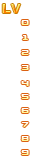
<style>
.page{position:relative;width:30px;height:160px;background:#ffffff}
.page>*{position:absolute;margin:0}
.t1{font:10px "Counter-StrikeRegular"}
.t2{font:10px "Counter-StrikeRegular";color:#ffffff}
</style>
<div class="page">
<p class="t1" style="left:21px;top:20px;width:8px;height:5px">0</p>
<p class="t1" style="left:22px;top:35px;width:6px;height:5px">1</p>
<p class="t1" style="left:21px;top:50px;width:8px;height:5px">2</p>
<p class="t1" style="left:21px;top:65px;width:8px;height:5px">3</p>
<p class="t1" style="left:21px;top:81px;width:8px;height:5px">4</p>
<p class="t1" style="left:21px;top:94px;width:8px;height:5px">5</p>
<p class="t1" style="left:21px;top:108px;width:8px;height:5px">6</p>
<p class="t2" style="left:21px;top:122px;width:8px;height:5px">7</p>
<p class="t1" style="left:21px;top:136px;width:8px;height:5px">8</p>
<p class="t1" style="left:21px;top:150px;width:8px;height:5px">9</p>
</div>
